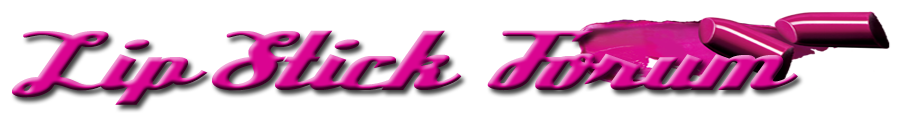
<style>
.page{position:relative;width:903px;height:113px;background:#ffffff}
.page>*{position:absolute;margin:0}
.t1{font:91.4px "DeftoneStylus";scale:1.58 1}
</style>
<div class="page">
<p class="t1" style="left:12px;top:30px;width:786px;height:75px">Lip Stick  Forum</p>
</div>
